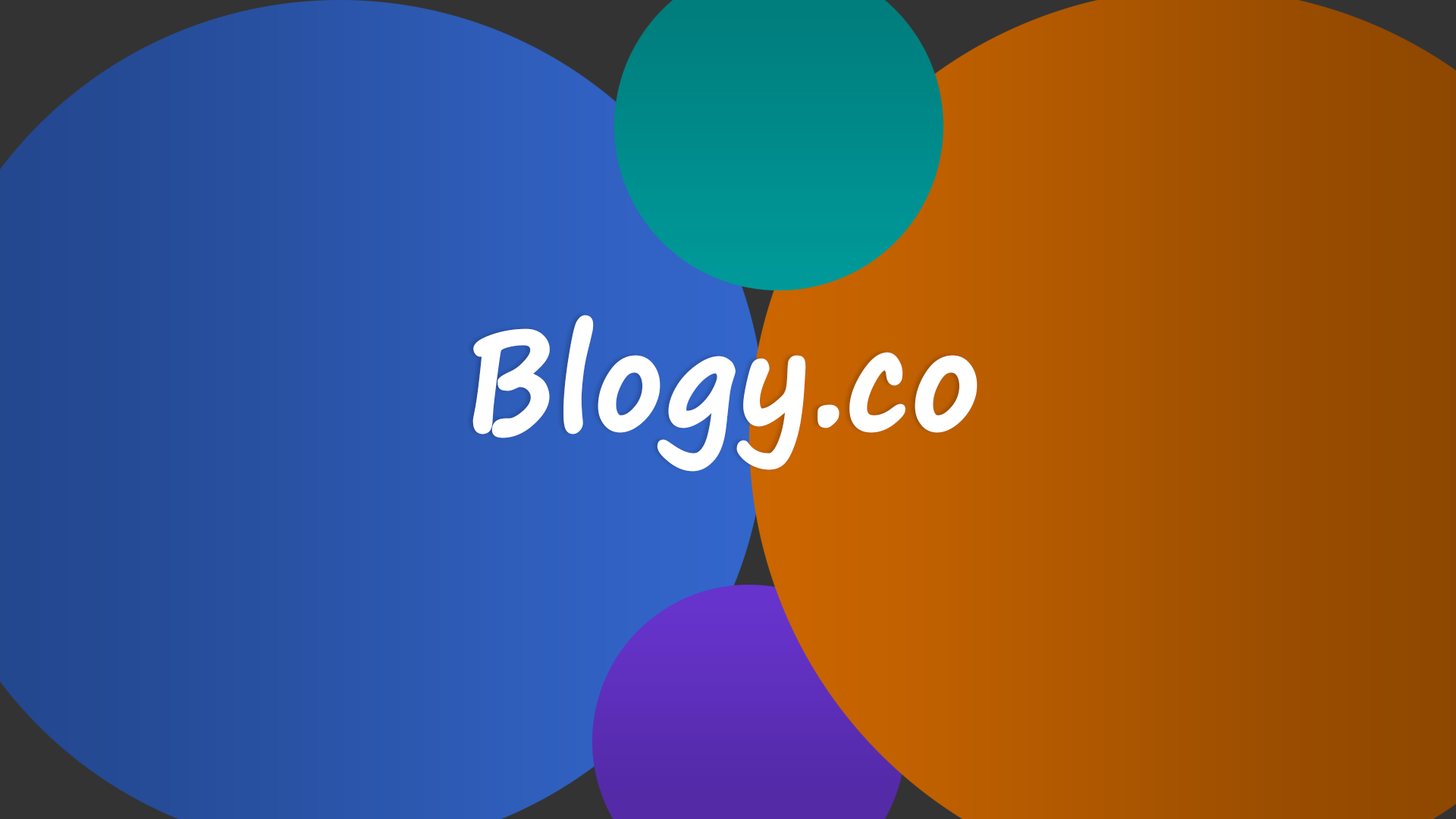
<style>
.page{position:relative;width:1456px;height:819px}
.page>*{position:absolute;margin:0}
.t1{font:133.5px "SegoePrint-Bold";color:#ffffff;font-weight:bold;scale:0.91 1}
</style>
<div class="page">
<p class="t1" style="left:472px;top:315px;width:505px;height:157px">Blogy.co</p>
</div>
